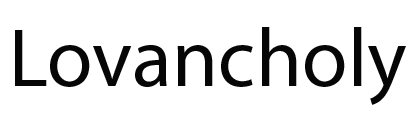
<style>
.page{position:relative;width:408px;height:126px;background:#ffffff}
.page>*{position:absolute;margin:0}
.t1{font:83.3px "MyriadPro-Regular";color:#060606}
</style>
<div class="page">
<p class="t1" style="left:15px;top:27px;width:391px;height:78px">Lovancholy</p>
</div>
